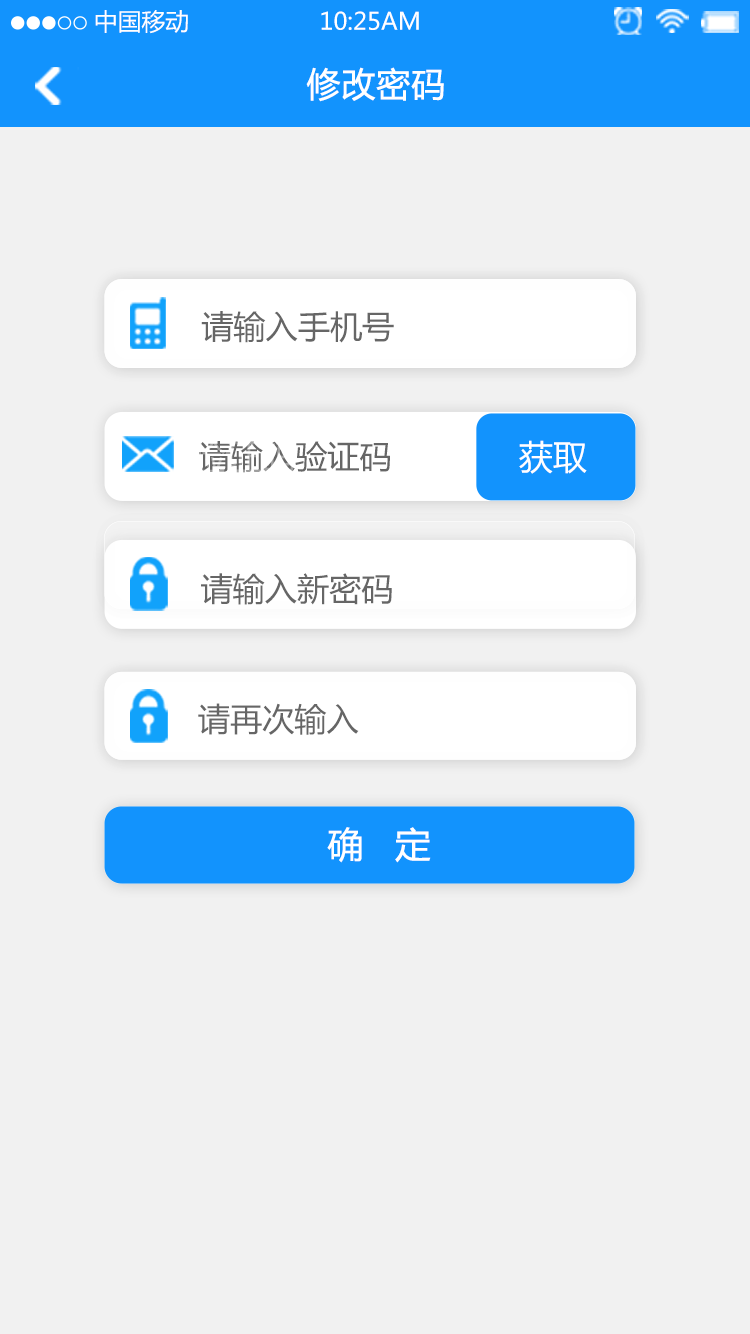
<style>
.page{position:relative;width:750px;height:1334px;background:#f1f1f1}
.page>*{position:absolute;margin:0}
.t1{font:23.8px "MicrosoftYaHei";color:#ffffff}
.t2{font:34px "MicrosoftYaHei";color:#ffffff;font-weight:bold}
.t3{font:32.1px "MicrosoftYaHei";color:#666666}
.t4{font:34px "MicrosoftYaHei";color:#ffffff}
.t5{font:35.7px "MicrosoftYaHei";color:#ffffff}
</style>
<div class="page">
<p class="t1" style="left:95px;top:10px;width:93px;height:24px">中国移动</p>
<p class="t1" style="left:321px;top:11px;width:98px;height:19px">10:25AM</p>
<p class="t2" style="left:306px;top:67px;width:138px;height:35px">修改密码</p>
<p class="t3" style="left:201px;top:311px;width:193px;height:32px">请输入手机号</p>
<p class="t3" style="left:199px;top:441px;width:191px;height:32px">请输入验证码</p>
<p class="t4" style="left:519px;top:440px;width:68px;height:34px">获取</p>
<p class="t3" style="left:201px;top:573px;width:191px;height:32px">请输入新密码</p>
<p class="t3" style="left:198px;top:703px;width:161px;height:32px">请再次输入</p>
<p class="t5" style="left:327px;top:827px;width:104px;height:36px">确   定</p>
</div>
